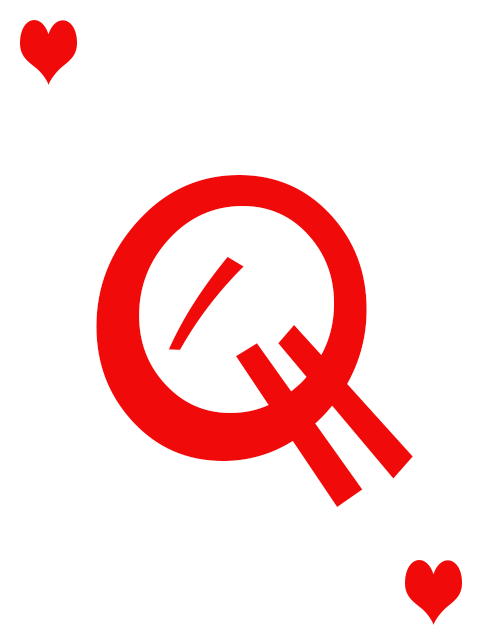
<style>
.page{position:relative;width:480px;height:640px;background:#ffffff}
.page>*{position:absolute;margin:0}
.t1{font:386.3px "Jokerman-Regular";color:#f10a0a}
</style>
<div class="page">
<p class="t1" style="left:96px;top:175px;width:317px;height:332px">Q</p>
</div>
